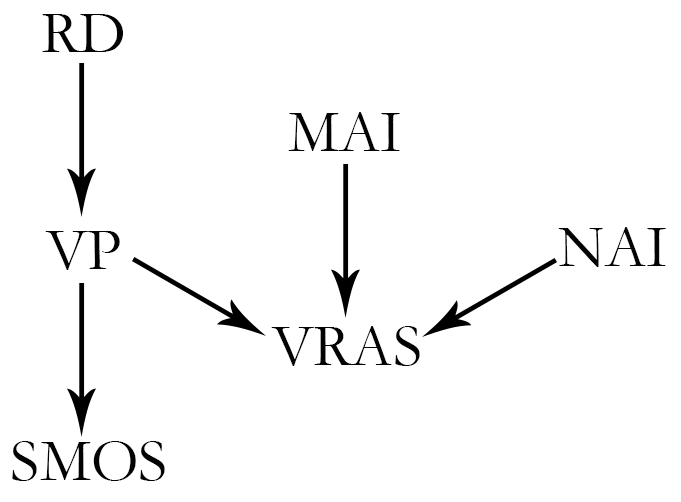
<style>
.page{position:relative;width:681px;height:502px;background:#ffffff}
.page>*{position:absolute;margin:0}
.t1{font:61.1px "Garamond";color:#030303}
</style>
<div class="page">
<p class="t1" style="left:42px;top:14px;width:81px;height:38px">RD</p>
<p class="t1" style="left:288px;top:112px;width:112px;height:39px">MAI</p>
<p class="t1" style="left:45px;top:231px;width:75px;height:39px">VP</p>
<p class="t1" style="left:558px;top:227px;width:108px;height:40px">NAI</p>
<p class="t1" style="left:271px;top:326px;width:149px;height:40px">VRAS</p>
<p class="t1" style="left:12px;top:441px;width:153px;height:40px">SMOS</p>
</div>
